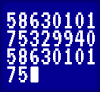
<style>
.page{position:relative;width:100px;height:92px;background:#030092}
.page>*{position:absolute;margin:0}
.t1{font:27px/18px "VT323-Regular";letter-spacing:0.005em;color:#ffffff}
</style>
<div class="page">
<p class="t1" style="left:7px;top:12px;width:88px;height:71px">58630101<br>75329940<br>58630101<br>75</p>
</div>
